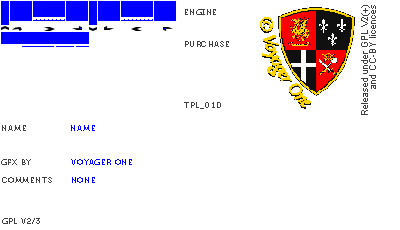
<style>
.page{position:relative;width:400px;height:230px;background:#ffffff}
.page>*{position:absolute;margin:0}
.t1{font:8px "Museo700-Regular";letter-spacing:0.075em;color:#404040;text-transform:uppercase}
.t2{font:8px "Museo700-Regular";letter-spacing:0.075em;color:#0000ff;text-transform:uppercase}
</style>
<div class="page">
<p class="t1" style="left:185px;top:9px;width:31px;height:6px">engine</p>
<p class="t1" style="left:185px;top:41px;width:44px;height:6px">purchase</p>
<p class="t1" style="left:184px;top:102px;width:37px;height:7px">tpl_01d</p>
<p class="t1" style="left:2px;top:125px;width:24px;height:6px">name</p>
<p class="t2" style="left:71px;top:125px;width:24px;height:6px">name</p>
<p class="t1" style="left:1px;top:159px;width:30px;height:6px">gfx by</p>
<p class="t2" style="left:71px;top:159px;width:61px;height:6px">voyager one</p>
<p class="t1" style="left:2px;top:177px;width:50px;height:6px">comments</p>
<p class="t2" style="left:72px;top:177px;width:23px;height:6px">none</p>
<p class="t1" style="left:2px;top:218px;width:38px;height:6px">gpl v2/3</p>
</div>
